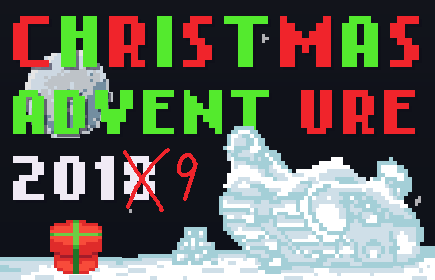
<style>
.page{position:relative;width:435px;height:280px}
.page>*{position:absolute;margin:0}
.t1{font:50px/66.7px "NokiaCellphoneFC-Small";letter-spacing:0.075em}
.t2{font:58.3px/66.7px "NokiaCellphoneFC-Small";letter-spacing:0.075em}
</style>
<div class="page">
<p class="t1" style="left:13px;top:16px;width:406px;height:184px"><span class="t2">C</span><span class="t2">H</span><span class="t2">R</span><span class="t2">I</span><span class="t2">S</span><span class="t2">T</span><span class="t2">M</span><span class="t2">A</span><span class="t2">S<br></span>ADVENT URE<br>2018</p>
</div>
